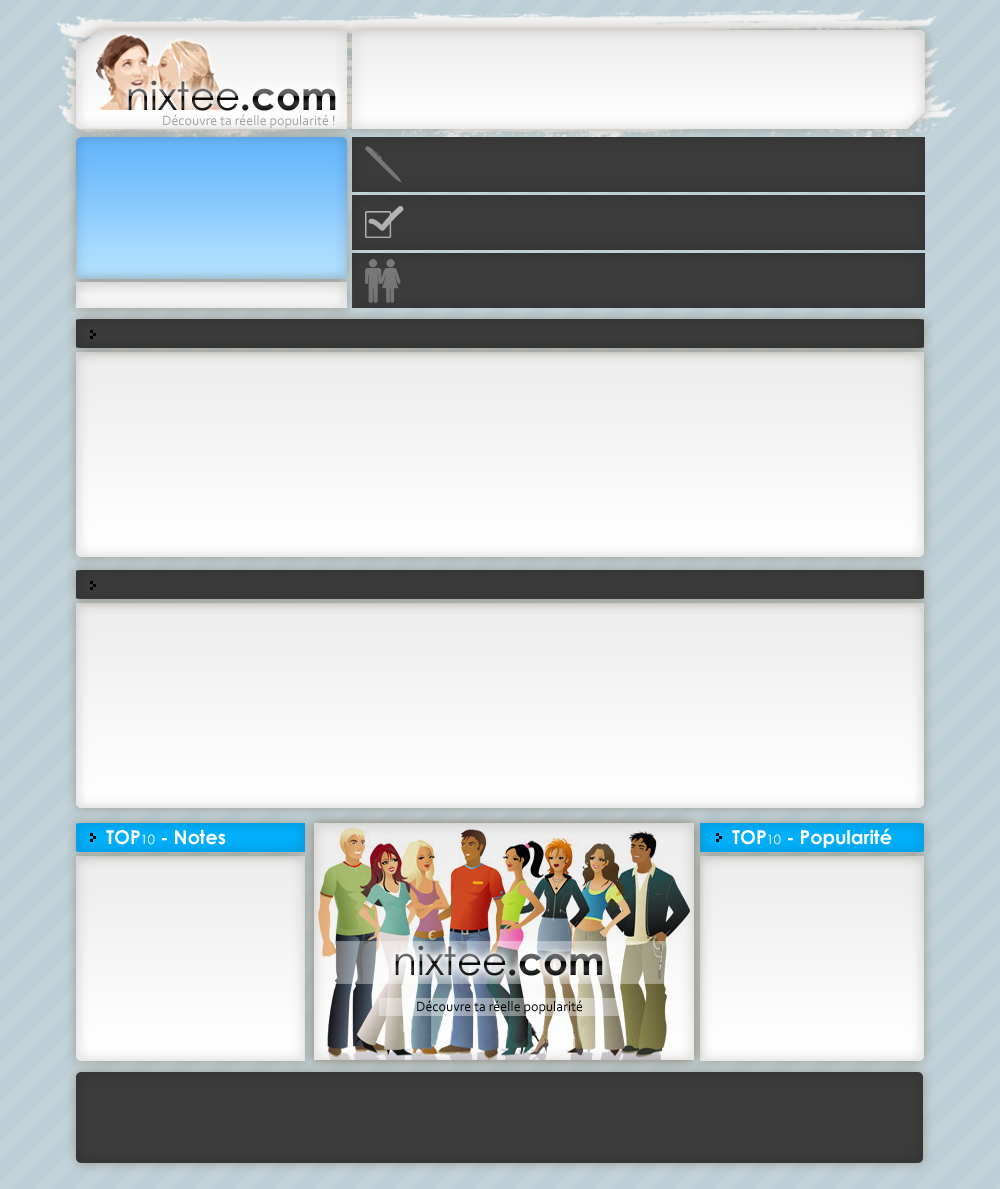
<style>
.page{position:relative;width:1000px;height:1189px}
.page>*{position:absolute;margin:0}
.t1{font:39px "CenturyGothic"}
.t2{font:39px "CenturyGothic-Bold"}
.t3{font:14px "Corbel";color:#a1a0a0}
.t4{font:19px "CenturyGothic-Bold";color:#ffffff}
.t5{font:13px "CenturyGothic";color:#ffffff}
.t6{font:14px "Corbel";color:#000000}
</style>
<div class="page">
<p class="t1" style="left:128px;top:80px;width:208px;height:31px">nixtee<span class="t2">.com</span></p>
<p class="t3" style="left:163px;top:114px;width:172px;height:15px">Découvre ta réelle popularité !</p>
<p class="t4" style="left:106px;top:830px;width:120px;height:15px">TOP<span class="t5">10</span> - Notes</p>
<p class="t4" style="left:732px;top:828px;width:160px;height:20px">TOP<span class="t5">10</span> - Popularité</p>
<p class="t1" style="left:395px;top:945px;width:208px;height:31px">nixtee<span class="t2">.com</span></p>
<p class="t6" style="left:417px;top:1000px;width:165px;height:15px">Découvre ta réelle popularité</p>
</div>
